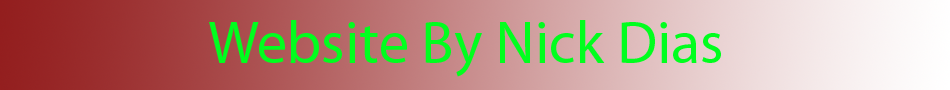
<style>
.page{position:relative;width:950px;height:90px}
.page>*{position:absolute;margin:0}
.t1{font:60px "MyriadPro-Regular";color:#00ff1e}
</style>
<div class="page">
<p class="t1" style="left:209px;top:20px;width:512px;height:57px">Website By Nick Dias</p>
</div>
